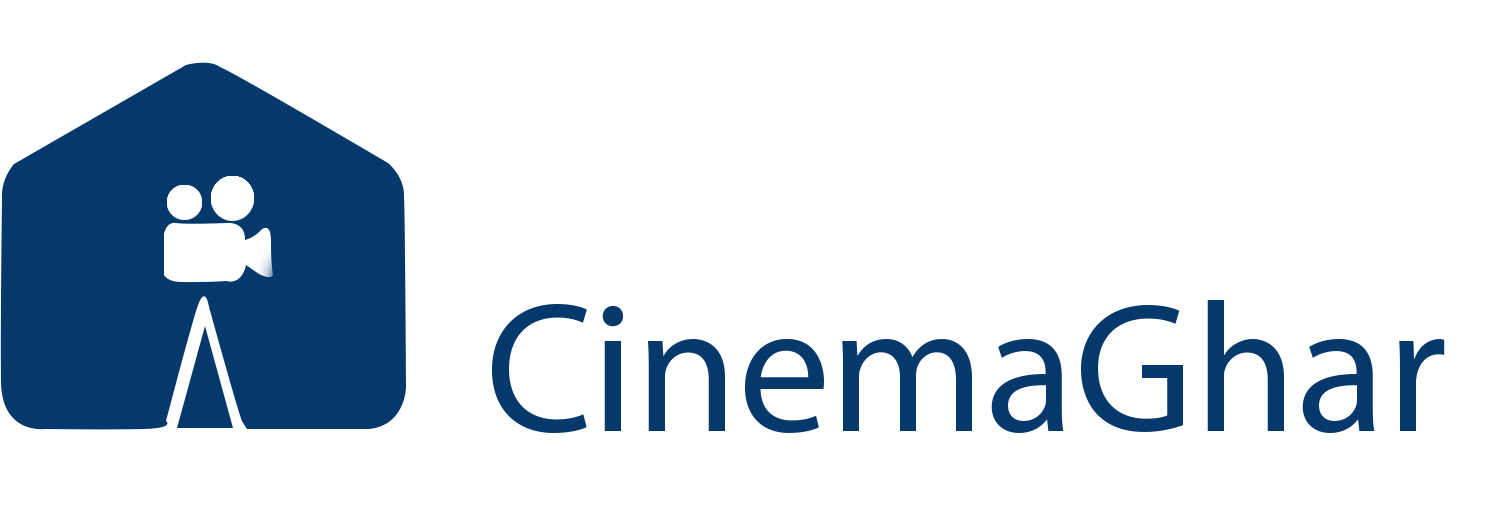
<style>
.page{position:relative;width:1500px;height:525px;background:#ffffff}
.page>*{position:absolute;margin:0}
.t1{font:185.2px "MyriadPro-Regular";color:#05386b}
</style>
<div class="page">
<p class="t1" style="left:492px;top:300px;width:953px;height:133px">CinemaGhar</p>
</div>
